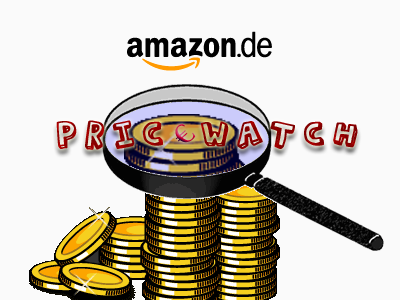
<style>
.page{position:relative;width:400px;height:300px;background:#fafafa}
.page>*{position:absolute;margin:0}
.t1{font:36px "ActionJackson";letter-spacing:0.2em;color:#910000;font-weight:bold}
.t2{font:30px "Garamond";letter-spacing:0.2em;scale:1.14 1}
.t3{font:36px "ActionJackson";letter-spacing:0.2em;color:#890000;font-weight:bold}
</style>
<div class="page">
<p class="t1" style="left:56px;top:120px;width:107px;height:30px">Pric</p>
<p class="t2" style="left:175px;top:123px;width:21px;height:20px;rotate:-42deg">€</p>
<p class="t3" style="left:200px;top:121px;width:158px;height:28px">Watch</p>
</div>
